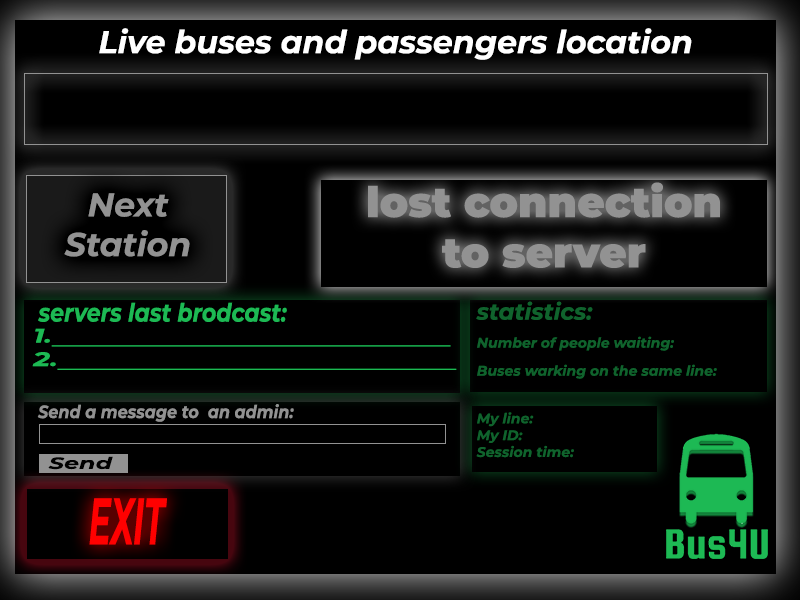
<style>
.page{position:relative;width:800px;height:600px;background:#000000}
.page>*{position:absolute;margin:0}
.t1{font:31.7px "Montserrat-BoldItalic";color:#ffffff}
.t2{font:33px "Montserrat-BoldItalic";color:#929292}
.t3{font:25.5px "Montserrat-BoldItalic";color:#1db954;scale:0.86 1}
.t4{font:14px/28px "Montserrat-BoldItalic";color:#10632d}
.t5{font:23px/28px "Montserrat-BoldItalic";color:#10632d}
.t6{font:19.6px "Montserrat-BoldItalic";color:#1db954;scale:1.44 1}
.t7{font:17.8px "Montserrat-BoldItalic";color:#929292;scale:0.9 1}
.t8{font:14px "Montserrat-BoldItalic";color:#10632d}
.t9{font:16.2px "Montserrat-BoldItalic";color:#010101;scale:1.47 1}
.t10{font:65.5px "Montserrat-BoldItalic";color:#ff0000;scale:0.5 1}
</style>
<div class="page">
<p class="t1" style="left:99px;top:28px;width:593px;height:32px">Live buses and passengers location</p>
<p class="t2" style="left:64px;top:193px;width:126px;height:64px;text-align:center">Next<br>Station</p>
<p class="t3" style="left:38px;top:302px;width:249px;height:20px">servers last brodcast:</p>
<p class="t4" style="left:476px;top:301px;width:241px;height:78px"><span class="t5">statistics:<br></span>Number of people waiting:<br>Buses warking on the same line:</p>
<p class="t6" style="left:32px;top:328px;width:425px;height:42px">1.                                                  <br>2.                                                  <br>1.</p>
<p class="t7" style="left:37px;top:404px;width:257px;height:18px">Send a message to  an admin:</p>
<p class="t8" style="left:476px;top:412px;width:98px;height:46px">My line:<br>My ID:<br>Session time:</p>
<p class="t9" style="left:48px;top:456px;width:65px;height:14px">Send</p>
<p class="t10" style="left:89px;top:498px;width:78px;height:47px">EXIT</p>
</div>
